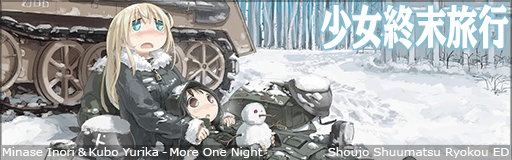
<style>
.page{position:relative;width:512px;height:160px}
.page>*{position:absolute;margin:0}
.t1{font:48px "PSP-NOW-MU-90pv-RKSJ-H";letter-spacing:-0.01em;color:#ffffff;scale:0.67 1}
.t2{font:11.5px "Verdana";letter-spacing:-0.01em;color:#ffffff;scale:1.05 1}
.t3{font:11.5px "Verdana";letter-spacing:-0.1em;color:#ffffff;scale:1.05 1}
</style>
<div class="page">
<p class="t1" style="left:321px;top:4px;width:188px;height:46px">少女終末旅行</p>
<p class="t2" style="left:2px;top:147px;width:261px;height:11px">Minase Inori<span class="t3"> &amp; </span>Kubo Yurika<span class="t3"> - </span>More One Night</p>
<p class="t2" style="left:328px;top:147px;width:181px;height:11px">Shoujo Shuumatsu Ryokou ED</p>
</div>
